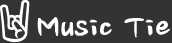
<style>
.page{position:relative;width:172px;height:43px;background:#333333}
.page>*{position:absolute;margin:0}
.t1{font:40px "NanumBrushOTF";color:#ffffff;font-weight:bold}
</style>
<div class="page">
<p class="t1" style="left:37px;top:17px;width:133px;height:21px">Music Tie</p>
</div>
